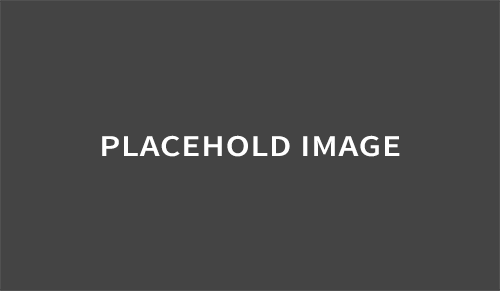
<style>
.page{position:relative;width:500px;height:291px;background:#444444}
.page>*{position:absolute;margin:0}
.t1{font:30.2px "SourceSansPro-Semibold";letter-spacing:0.025em;color:#ffffff;text-transform:uppercase;scale:1.17 1}
</style>
<div class="page">
<p class="t1" style="left:102px;top:135px;width:298px;height:22px">placehold Image</p>
</div>
